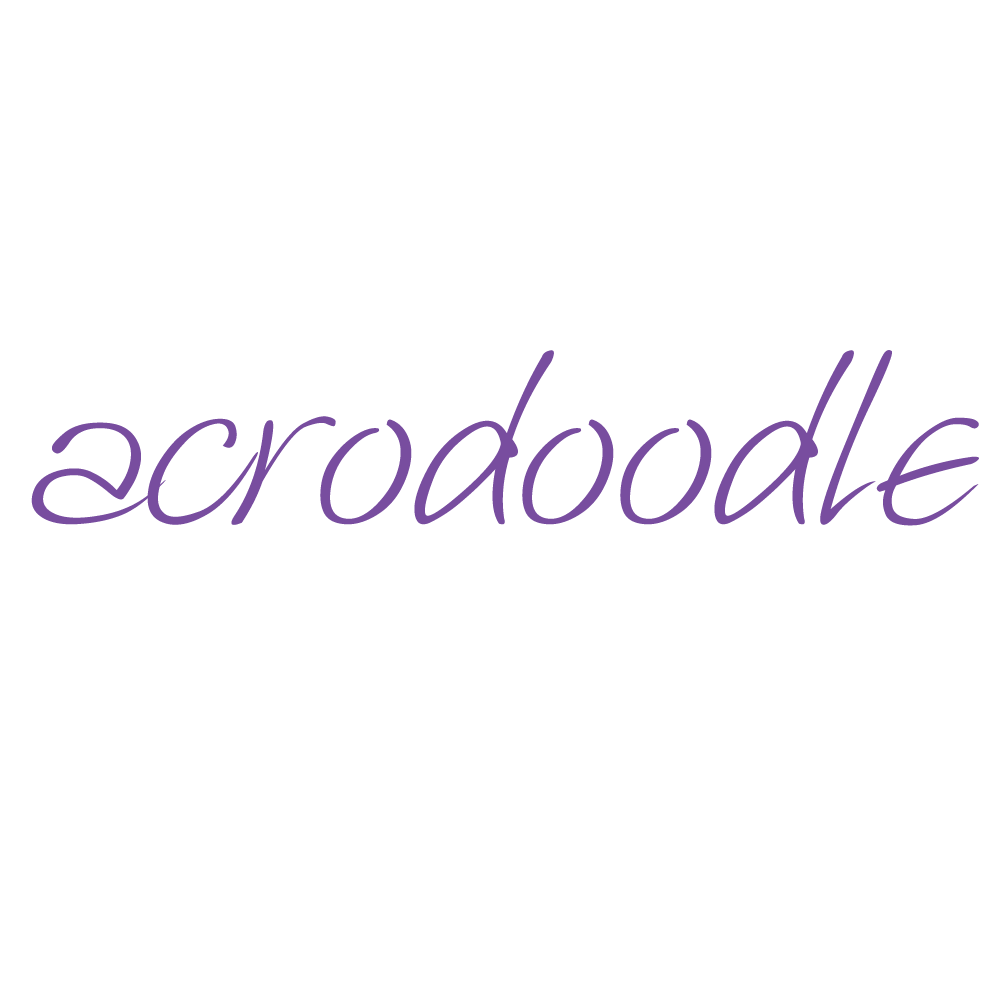
<style>
.page{position:relative;width:1000px;height:1000px;background:#ffffff}
.page>*{position:absolute;margin:0}
.t1{font:145.8px "Kingthings-Wrote";letter-spacing:0.05em;color:#784d9f;font-style:italic}
</style>
<div class="page">
<p class="t1" style="left:31px;top:350px;width:948px;height:176px">acrodoodle</p>
</div>
